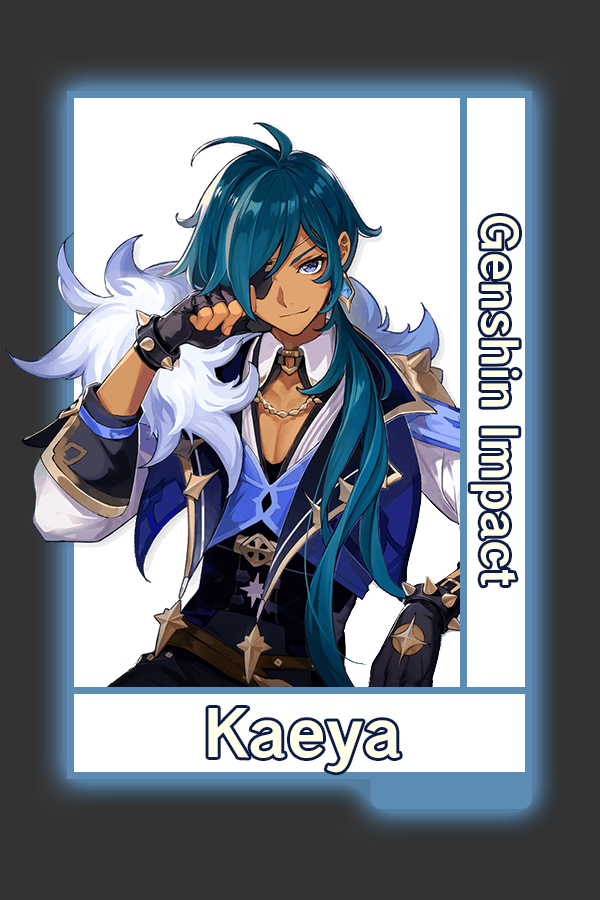
<style>
.page{position:relative;width:600px;height:900px;background:#333333}
.page>*{position:absolute;margin:0}
.t1{font:48.8px "HYWenHei-HEW";color:#fefef4}
.t2{font:65.2px "HYWenHei-HEW";color:#fefef4}
</style>
<div class="page">
<p class="t1" style="left:470px;top:216px;width:50px;height:370px;rotate:90deg">Genshin Impact</p>
<p class="t2" style="left:208px;top:708px;width:192px;height:65px">Kaeya</p>
</div>
